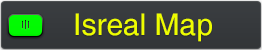
<style>
.page{position:relative;width:262px;height:50px}
.page>*{position:absolute;margin:0}
.t1{font:30px "Helvetica";color:#eefd00}
</style>
<div class="page">
<p class="t1" style="left:75px;top:13px;width:137px;height:29px">Isreal Map</p>
</div>
